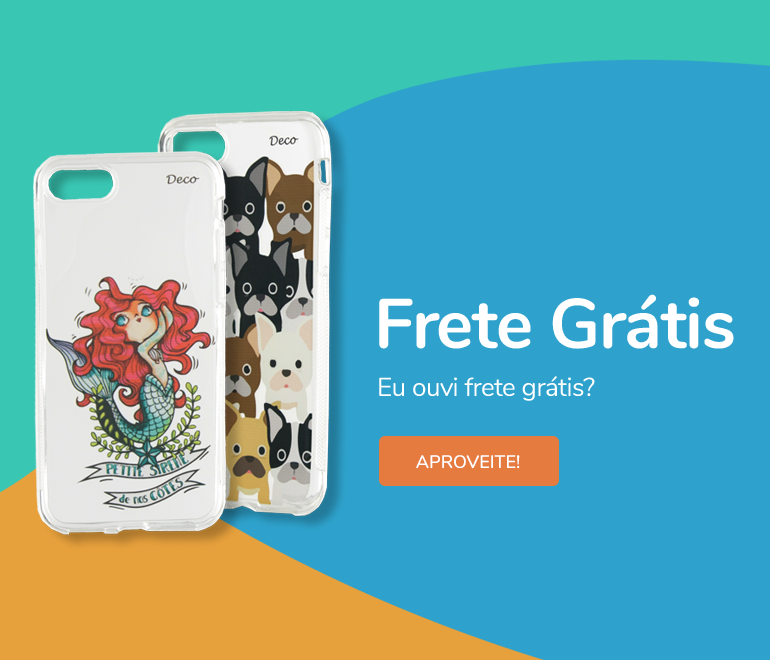
<style>
.page{position:relative;width:770px;height:660px;background:#2ea2cc}
.page>*{position:absolute;margin:0}
.t1{font:70px "Nunito-Bold";letter-spacing:-0.02em;color:#ffffff}
.t2{font:26px "Nunito-Regular";letter-spacing:-0.02em;color:#ffffff}
.t3{font:18px "Nunito-SemiBold";color:#ffffff}
</style>
<div class="page">
<p class="t1" style="left:379px;top:294px;width:355px;height:55px">Frete Grátis</p>
<p class="t2" style="left:379px;top:376px;width:216px;height:25px">Eu ouvi frete grátis?</p>
<p class="t3" style="left:416px;top:455px;width:104px;height:14px">APROVEITE!</p>
</div>
